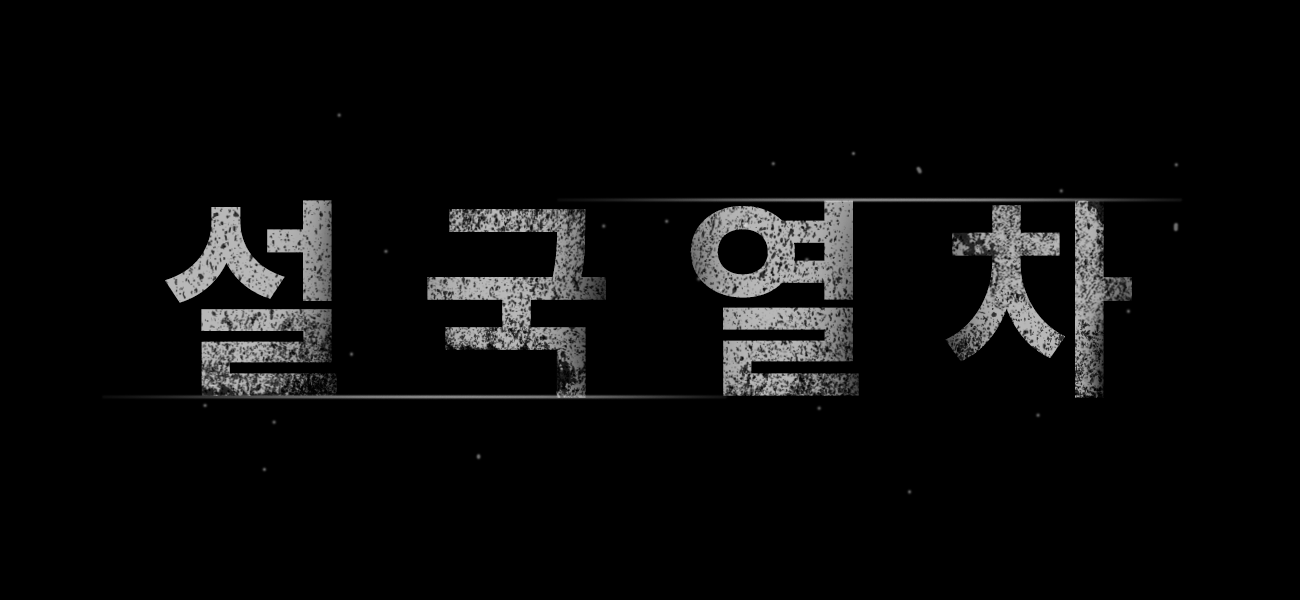
<style>
.page{position:relative;width:1300px;height:600px;background:#000000}
.page>*{position:absolute;margin:0}
.t1{font:213.8px "NotoSansCJKkr-Bold";letter-spacing:0.3em;text-transform:uppercase}
</style>
<div class="page">
<p class="t1" style="left:165px;top:200px;width:967px;height:198px">설국열차</p>
</div>
